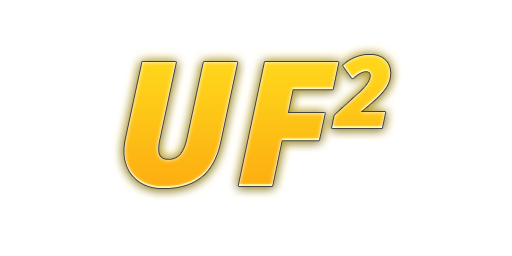
<style>
.page{position:relative;width:512px;height:256px;background:#ffffff}
.page>*{position:absolute;margin:0}
.t1{font:174px "OpenSans-ExtraboldItalic";color:#fdb813}
</style>
<div class="page">
<p class="t1" style="left:124px;top:55px;width:267px;height:133px">UF2</p>
</div>
